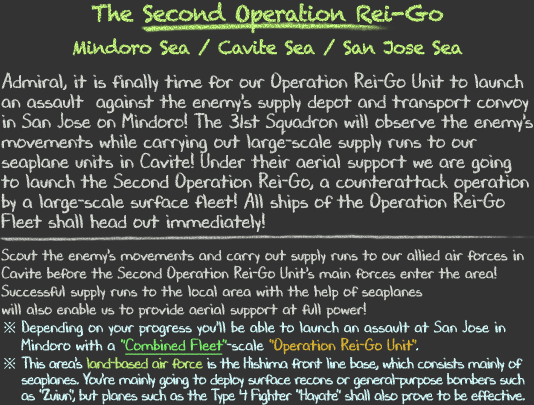
<style>
.page{position:relative;width:534px;height:405px;background:#333333}
.page>*{position:absolute;margin:0}
.t1{font:18px/36px "Chalkduster";letter-spacing:-0.04em}
.t2{font:22px/36px "Chalkduster";letter-spacing:-0.04em}
.t3{font:20px/20px "DJBChalkItUp";color:#d9ded6}
.t4{font:16px/18px "DJBChalkItUp";color:#d9ded6}
.t5{font:16px/18px "TimesNewRomanPSMT";color:#d7feff}
.t6{font:16px/18px "DJBChalkItUp";color:#d7feff}
.t7{font:16px/18px "DJBChalkItUp";color:#7bf26b}
.t8{font:16px/18px "DJBChalkItUp";color:#7bf26b;text-decoration:underline}
.t9{font:16px/18px "DJBChalkItUp";color:#dfb731}
.t10{font:16px/16px "TimesNewRomanPSMT";color:#d7feff}
.t11{font:16px/16px "DJBChalkItUp";letter-spacing:-0.04em;color:#d7feff}
.t12{font:16px/16px "DJBChalkItUp";letter-spacing:-0.04em;color:#bdef78}
</style>
<div class="page">
<p class="t1" style="left:72px;top:2px;width:391px;height:54px;text-align:center"><span class="t2">The Second Operation Rei-Go<br></span>Mindoro Sea / Cavite Sea / San Jose Sea</p>
<p class="t3" style="left:0px;top:71px;width:533px;height:334px">Admiral, it is finally time for our Operation Rei-Go Unit to launch<br>an assault  against the enemy's supply depot and transport convoy<br>in San Jose on Mindoro! The 31st Squadron will observe the enemy's<br>movements while carrying out large-scale supply runs to our<br>seaplane units in Cavite! Under their aerial support we are going<br>to launch the Second Operation Rei-Go, a counterattack operation<br>by a large-scale surface fleet! All ships of the Operation Rei-Go<br>Fleet shall head out immediately!<br><br><span class="t4">Scout the enemy's movements and carry out supply runs to our allied air forces in<br>Cavite before the Second Operation Rei-Go Unit's main forces enter the area!<br>Successful supply runs to the local area with the help of seaplanes<br>will also enable us to provide aerial support at full power!<br></span><span class="t5">※ </span><span class="t6">Depending on your progress you'll be able to launch an assault at San Jose in<br>　 Mindoro with a </span><span class="t7">"</span><span class="t8">Combined Fleet</span><span class="t7">"</span><span class="t6">-scale </span><span class="t9">"Operation Rei-Go Unit"</span><span class="t6">.<br></span><span class="t10">※ </span><span class="t11">This area's </span><span class="t12">land-based air force</span><span class="t11"> is the Hishima front line base, which consists mainly of<br>　 seaplanes. You're mainly going to deploy surface recons or general-purpose bombers such<br>　 as "Zuiun", but planes such as the Type 4 Fighter "Hayate" shall also prove to be effective.</span></p>
</div>
